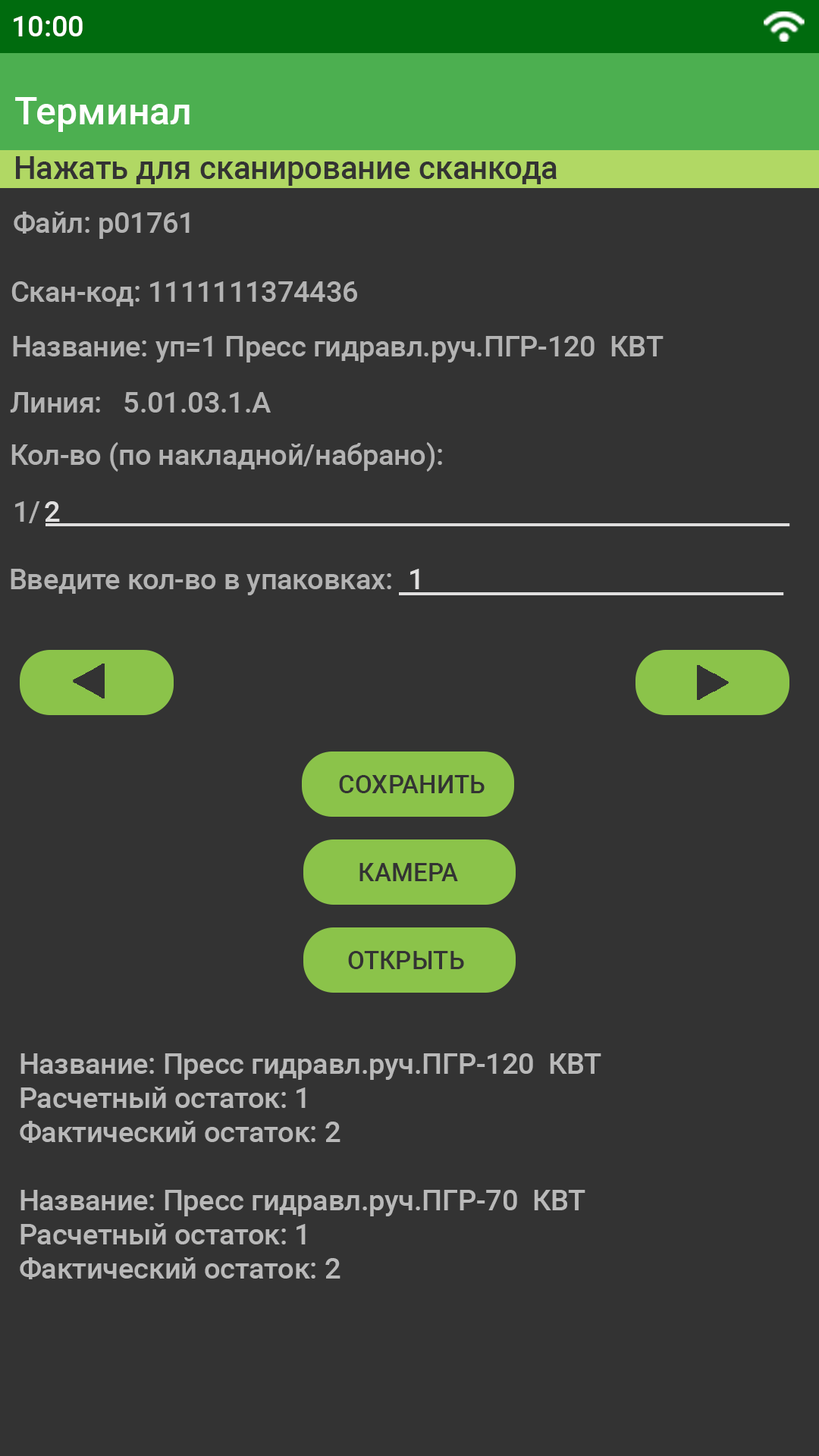
<style>
.page{position:relative;width:819px;height:1456px;background:#333333}
.page>*{position:absolute;margin:0}
.t1{font:31.6px "Roboto-Medium";color:#333333}
.t2{font:28.4px "Roboto-Medium";color:#b3b3b3}
.t3{font:28.4px "Roboto-Medium";color:#e0dfdf}
.t4{font:25.3px "Roboto-Medium";color:#333333}
.t5{font:28.4px "Roboto-Medium";color:#b9b9b9}
</style>
<div class="page">
<p class="t1" style="left:16px;top:156px;width:541px;height:30px">Нажать для сканирование сканкода</p>
<p class="t2" style="left:14px;top:212px;width:176px;height:27px">Файл: p01761</p>
<p class="t2" style="left:11px;top:281px;width:346px;height:25px">Скан-код: 1111111374436</p>
<p class="t2" style="left:13px;top:336px;width:651px;height:26px">Название: уп=1 Пресс гидравл.руч.ПГР-120  КВТ</p>
<p class="t2" style="left:10px;top:392px;width:261px;height:21px">Линия:   5.01.03.1.А</p>
<p class="t2" style="left:11px;top:442px;width:431px;height:30px">Кол-во (по накладной/набрано):</p>
<p class="t2" style="left:15px;top:501px;width:25px;height:22px">1/</p>
<p class="t3" style="left:45px;top:501px;width:15px;height:21px">2</p>
<p class="t3" style="left:45px;top:523px;width:745px;height:3px">__________________________________________________________</p>
<p class="t2" style="left:11px;top:569px;width:380px;height:26px">Введите кол-во в упаковках:</p>
<p class="t3" style="left:410px;top:569px;width:9px;height:20px">1</p>
<p class="t3" style="left:399px;top:592px;width:385px;height:3px">______________________________</p>
<p class="t4" style="left:339px;top:775px;width:146px;height:18px">СОХРАНИТЬ</p>
<p class="t4" style="left:359px;top:863px;width:99px;height:18px">КАМЕРА</p>
<p class="t4" style="left:348px;top:951px;width:116px;height:18px">ОТКРЫТЬ</p>
<p class="t5" style="left:20px;top:1053px;width:581px;height:226px">Название: Пресс гидравл.руч.ПГР-120  КВТ<br>Расчетный остаток: 1<br>Фактический остаток: 2<br><br>Название: Пресс гидравл.руч.ПГР-70  КВТ<br>Расчетный остаток: 1<br>Фактический остаток: 2</p>
</div>
